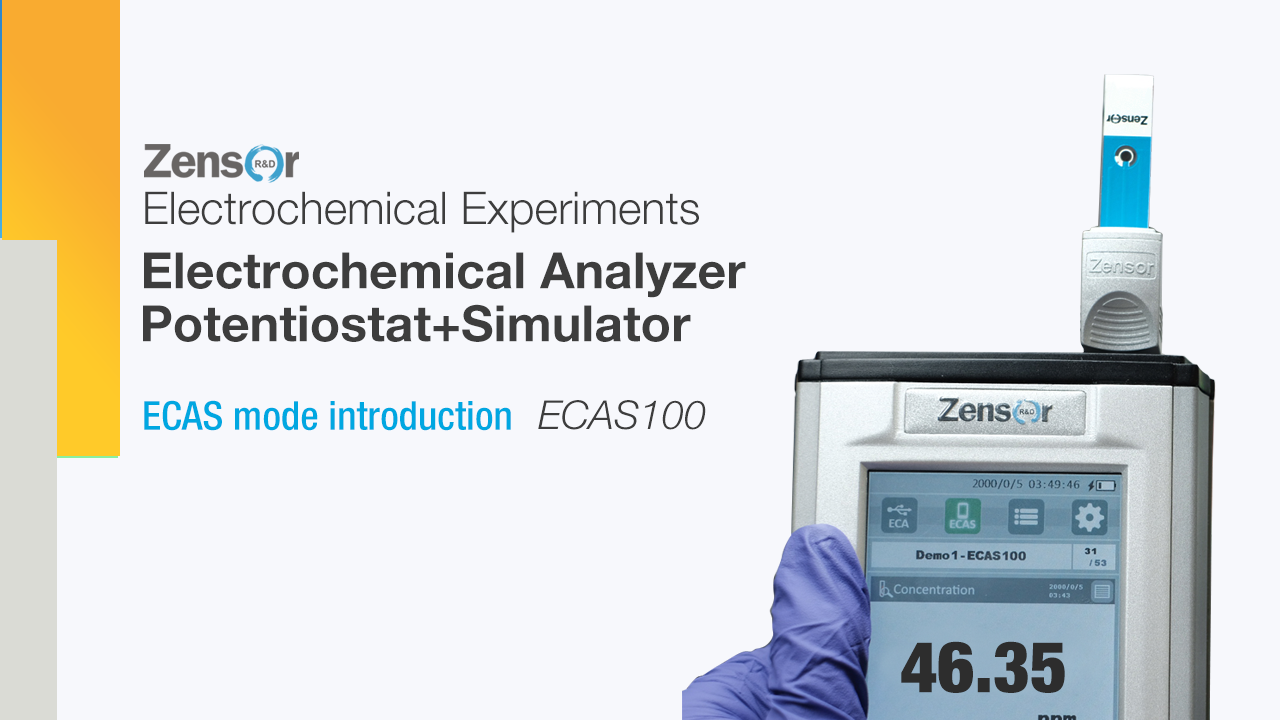
<style>
.page{position:relative;width:1280px;height:720px;background:#f7f8fc}
.page>*{position:absolute;margin:0}
.t1{font:45px "HelveticaNeueLTPro-Lt";color:#3d3d3d}
.t2{font:50px "HelveticaNeueLTPro-Bd";color:#3d3d3d}
.t3{font:40px "HelveticaNeueLTPro-MdCn";color:#00a7e1}
.t4{font:40px "HelveticaNeueLTPro-LtIt";color:#3d3d3d}
.t5{font:71.6px "HelveticaNeue-CondensedBlack";color:#2d2d2d}
</style>
<div class="page">
<p class="t1" style="left:145px;top:191px;width:554px;height:42px">Electrochemical Experiments</p>
<p class="t2" style="left:144px;top:252px;width:602px;height:46px">Electrochemical Analyzer</p>
<p class="t2" style="left:143px;top:304px;width:548px;height:38px">Potentiostat+Simulator</p>
<p class="t3" style="left:144px;top:400px;width:367px;height:31px">ECAS mode introduction</p>
<p class="t4" style="left:538px;top:400px;width:168px;height:30px">ECAS100</p>
<p class="t5" style="left:901px;top:641px;width:164px;height:52px">46.35</p>
</div>
